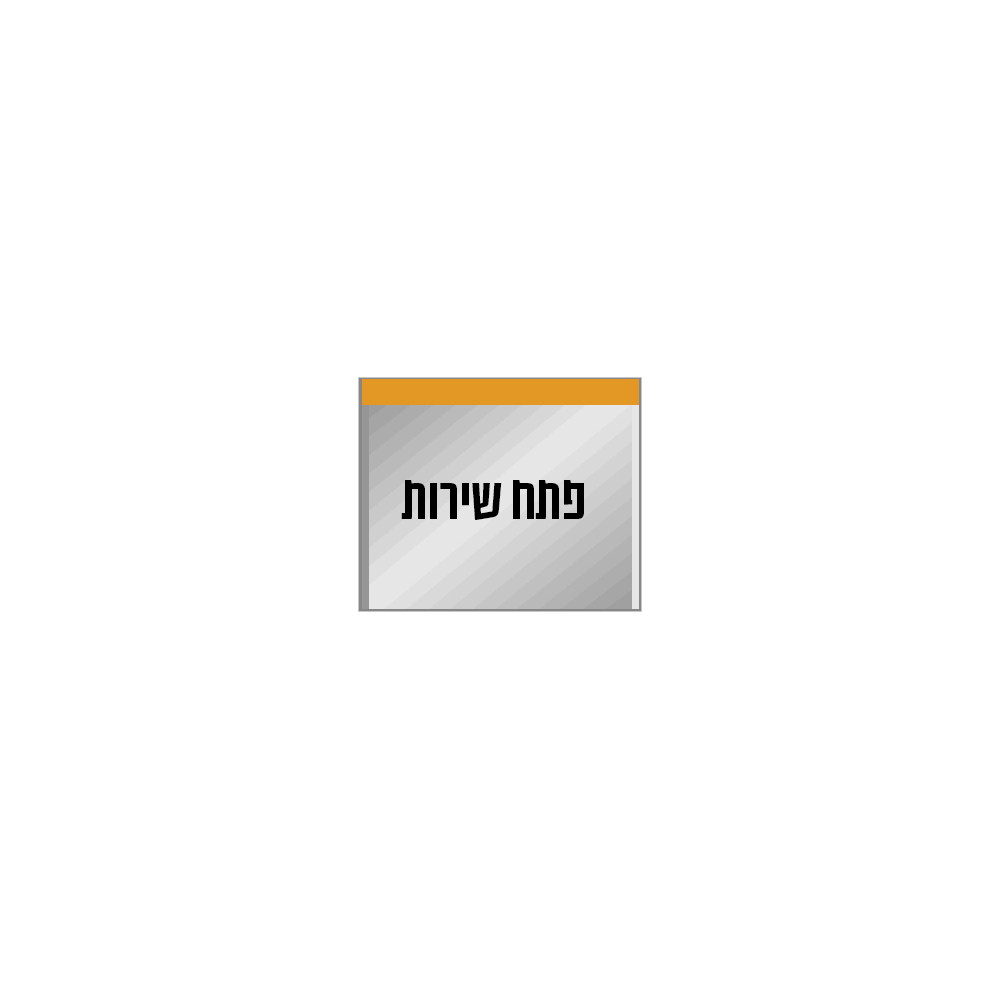
<style>
.page{position:relative;width:1000px;height:1000px;background:#ffffff}
.page>*{position:absolute;margin:0}
.t1{font:72px "EzerSusita-Regular";letter-spacing:-0.02em;color:#000000}
</style>
<div class="page">
<p class="t1" style="left:401px;top:480px;width:183px;height:40px">תוריש חתפ</p>
</div>
